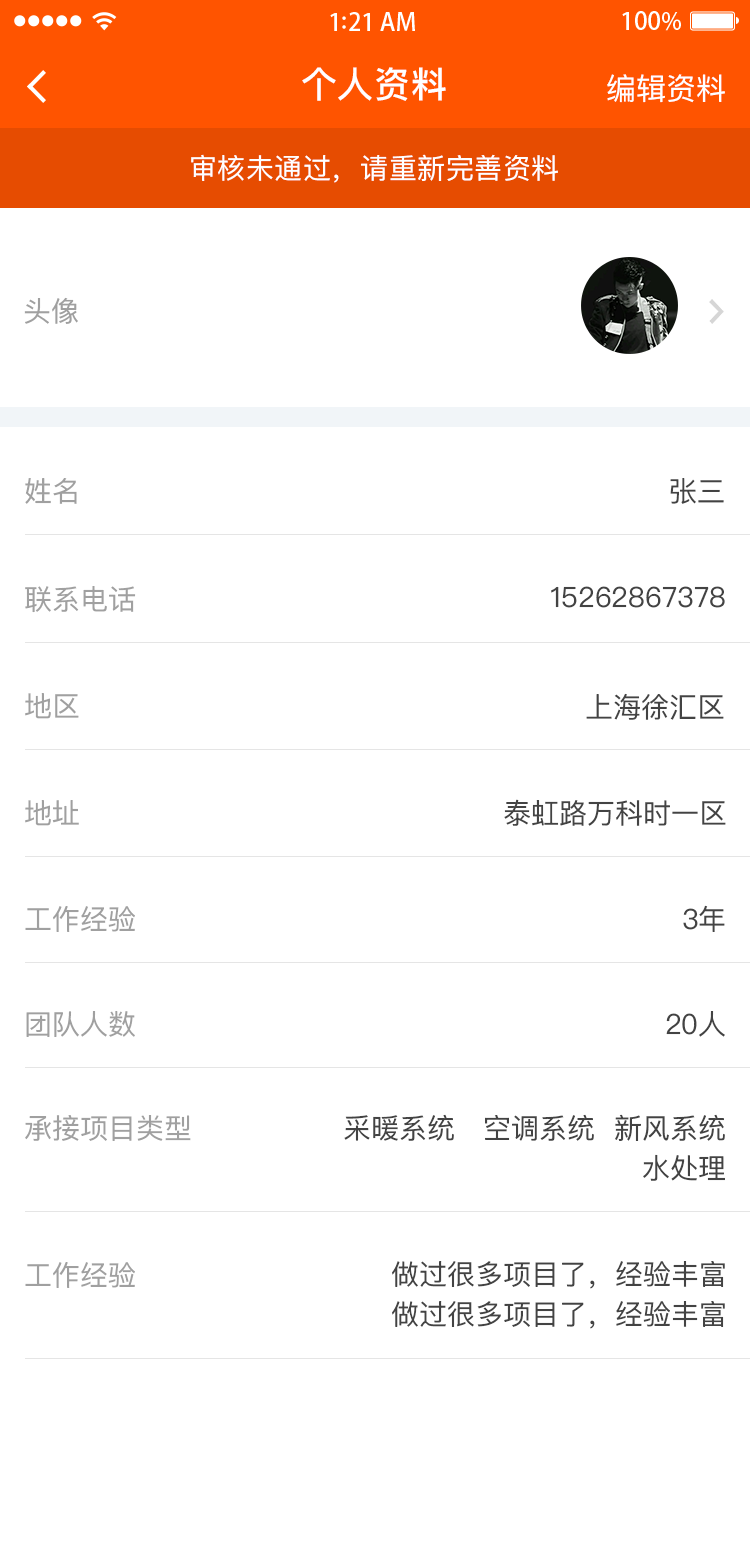
<style>
.page{position:relative;width:750px;height:1564px;background:#ffffff}
.page>*{position:absolute;margin:0}
.t1{font:36px "PingFangSC-Medium";letter-spacing:0.02em;color:#ffffff}
.t2{font:30px "PingFangSC-Regular";color:#ffffff}
.t3{font:28px "PingFangSC-Regular";letter-spacing:0.02em;color:#ffffff}
.t4{font:28px "PingFangSC-Regular";color:#a0a0a0;text-transform:uppercase}
.t5{font:28px "PingFangSC-Regular";color:#a0a0a0}
.t6{font:28px "PingFangSC-Regular";color:#434343}
.t7{font:28px/44px "PingFangSC-Regular";color:#434343}
</style>
<div class="page">
<p class="t1" style="left:302px;top:67px;width:144px;height:34px">个人资料</p>
<p class="t2" style="left:607px;top:74px;width:118px;height:29px">编辑资料</p>
<p class="t3" style="left:191px;top:154px;width:367px;height:29px">审核未通过，请重新完善资料</p>
<p class="t4" style="left:24px;top:297px;width:54px;height:27px">头像</p>
<p class="t5" style="left:25px;top:478px;width:52px;height:26px">姓名</p>
<p class="t6" style="left:670px;top:478px;width:54px;height:26px">张三</p>
<p class="t5" style="left:25px;top:586px;width:111px;height:27px">联系电话</p>
<p class="t6" style="left:551px;top:586px;width:174px;height:22px">15262867378</p>
<p class="t5" style="left:25px;top:693px;width:54px;height:26px">地区</p>
<p class="t6" style="left:586px;top:693px;width:138px;height:27px">上海徐汇区</p>
<p class="t5" style="left:25px;top:800px;width:54px;height:26px">地址</p>
<p class="t6" style="left:504px;top:799px;width:222px;height:27px">泰虹路万科时一区</p>
<p class="t6" style="left:683px;top:905px;width:42px;height:27px">3年</p>
<p class="t5" style="left:25px;top:906px;width:110px;height:26px">工作经验</p>
<p class="t5" style="left:26px;top:1011px;width:109px;height:26px">团队人数</p>
<p class="t6" style="left:666px;top:1011px;width:59px;height:26px">20人</p>
<p class="t5" style="left:25px;top:1115px;width:166px;height:26px">承接项目类型</p>
<p class="t7" style="left:344px;top:1114px;width:381px;height:67px;text-align:right">采暖系统   空调系统  新风系统<br>水处理</p>
<p class="t5" style="left:25px;top:1262px;width:110px;height:26px">工作经验</p>
<p class="t7" style="left:392px;top:1261px;width:333px;height:68px;text-align:right">做过很多项目了，经验丰富<br>做过很多项目了，经验丰富</p>
</div>
